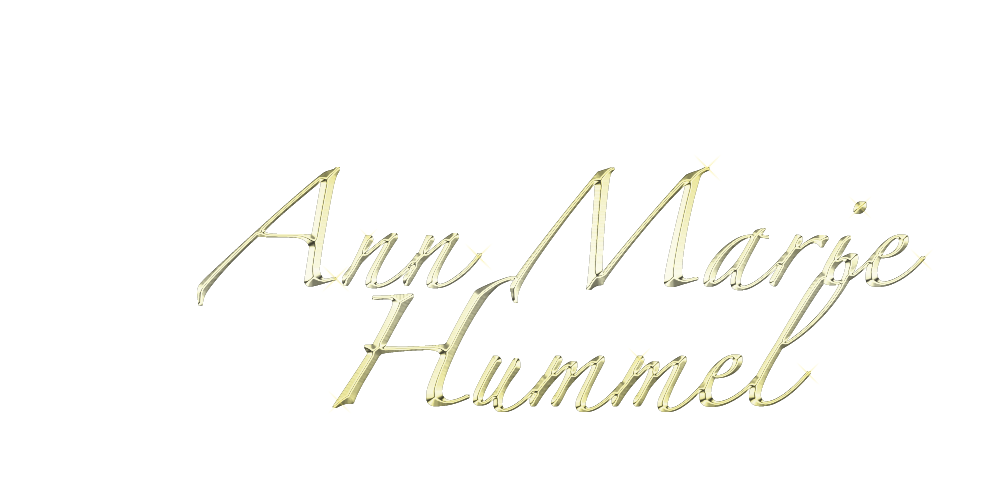
<style>
.page{position:relative;width:1000px;height:500px;background:#ffffff}
.page>*{position:absolute;margin:0}
.t1{font:90px "Zapfino";letter-spacing:0.005em;font-weight:bold}
.t2{font:100px "Zapfino";letter-spacing:0.005em;font-weight:bold}
</style>
<div class="page">
<p class="t1" style="left:197px;top:167px;width:729px;height:245px;text-align:center"><span class="t2">A</span>nn <span class="t2">M</span>arie<br><span class="t2">H</span>ummel</p>
<p class="t1" style="left:197px;top:167px;width:729px;height:245px;text-align:center"><span class="t2">A</span>nn <span class="t2">M</span>arie<br><span class="t2">H</span>ummel</p>
</div>
